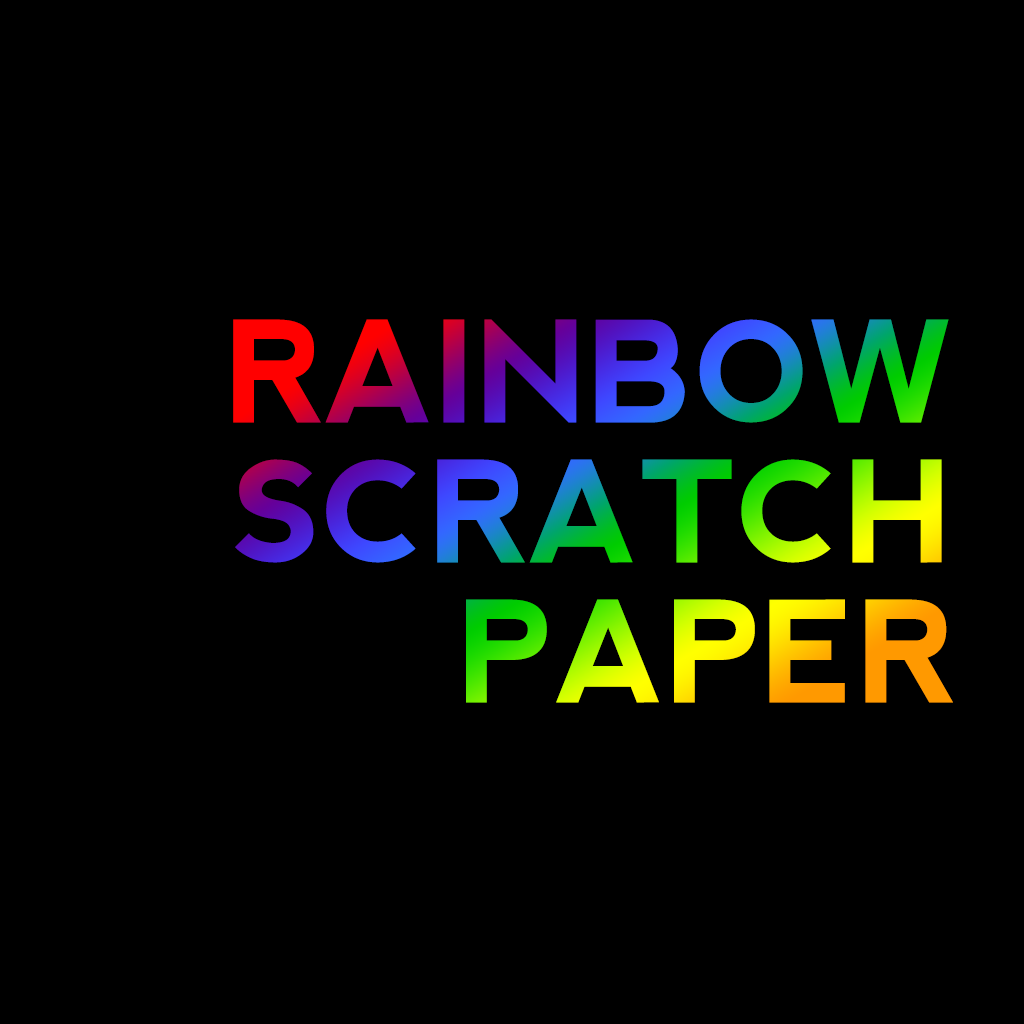
<style>
.page{position:relative;width:1024px;height:1024px;background:#000000}
.page>*{position:absolute;margin:0}
.t1{font:140px/140px "nevis-Bold";text-transform:uppercase}
</style>
<div class="page">
<p class="t1" style="left:233px;top:319px;width:720px;height:384px;text-align:right">Rainbow<br>Scratch<br>Paper</p>
</div>
